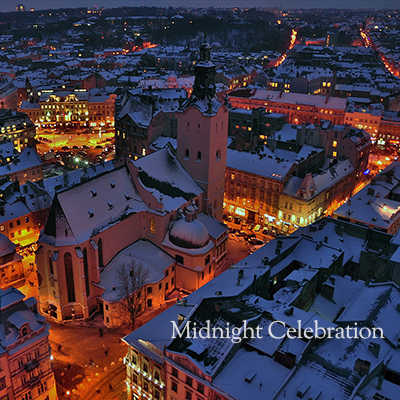
<style>
.page{position:relative;width:400px;height:400px}
.page>*{position:absolute;margin:0}
.t1{font:24px "SortsMillGoudy-Regular";letter-spacing:-0.025em;color:#d7d9de}
</style>
<div class="page">
<p class="t1" style="left:170px;top:319px;width:215px;height:25px">Midnight Celebration</p>
</div>
